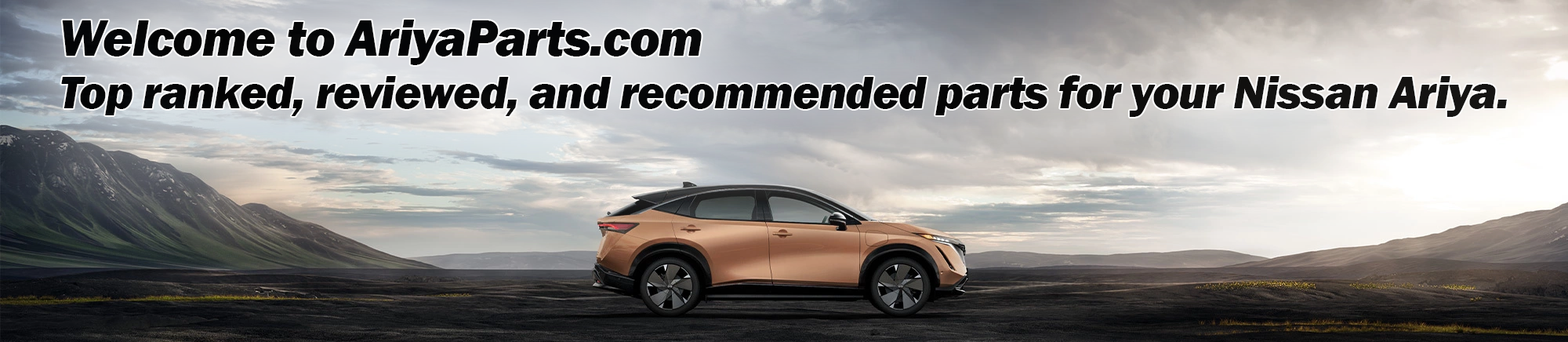
<style>
.page{position:relative;width:1568px;height:342px}
.page>*{position:absolute;margin:0}
.t1{font:47px/52.3px "FranklinGothic-HeavyItalic";letter-spacing:-0.02em;color:#000000}
.t2{font:52.3px/52.3px "FranklinGothic-HeavyItalic";letter-spacing:-0.02em;color:#000000}
</style>
<div class="page">
<p class="t1" style="left:61px;top:20px;width:1446px;height:97px;opacity:0.96"><span class="t2">Welcome to AriyaParts.com<br></span>Top ranked, reviewed, and recommended parts for your Nissan Ariya.</p>
</div>
